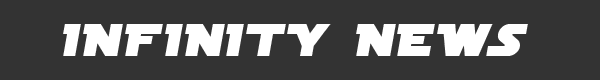
<style>
.page{position:relative;width:600px;height:80px;background:#333333}
.page>*{position:absolute;margin:0}
.t1{font:48px "SFDistantGalaxyAlternate-Italic";letter-spacing:0.12em;color:#ffffff}
</style>
<div class="page">
<p class="t1" style="left:63px;top:24px;width:465px;height:32px">INFINITY NEWS</p>
</div>
